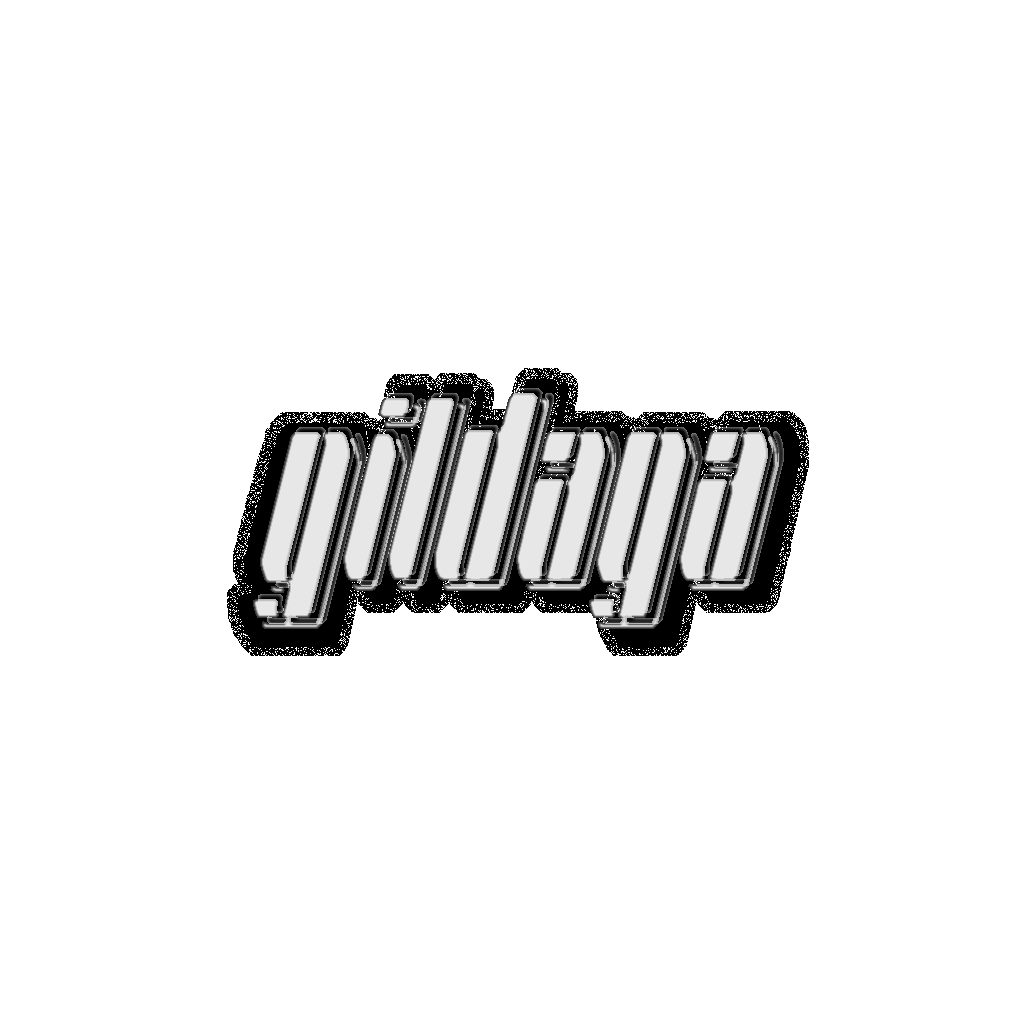
<style>
.page{position:relative;width:1024px;height:1024px;background:#ffffff}
.page>*{position:absolute;margin:0}
.t1{font:400px "Farawaygalaxy"}
</style>
<div class="page">
<p class="t1" style="left:258px;top:388px;width:526px;height:236px">gildaga</p>
<p class="t1" style="left:253px;top:393px;width:526px;height:236px">gildaga</p>
</div>
